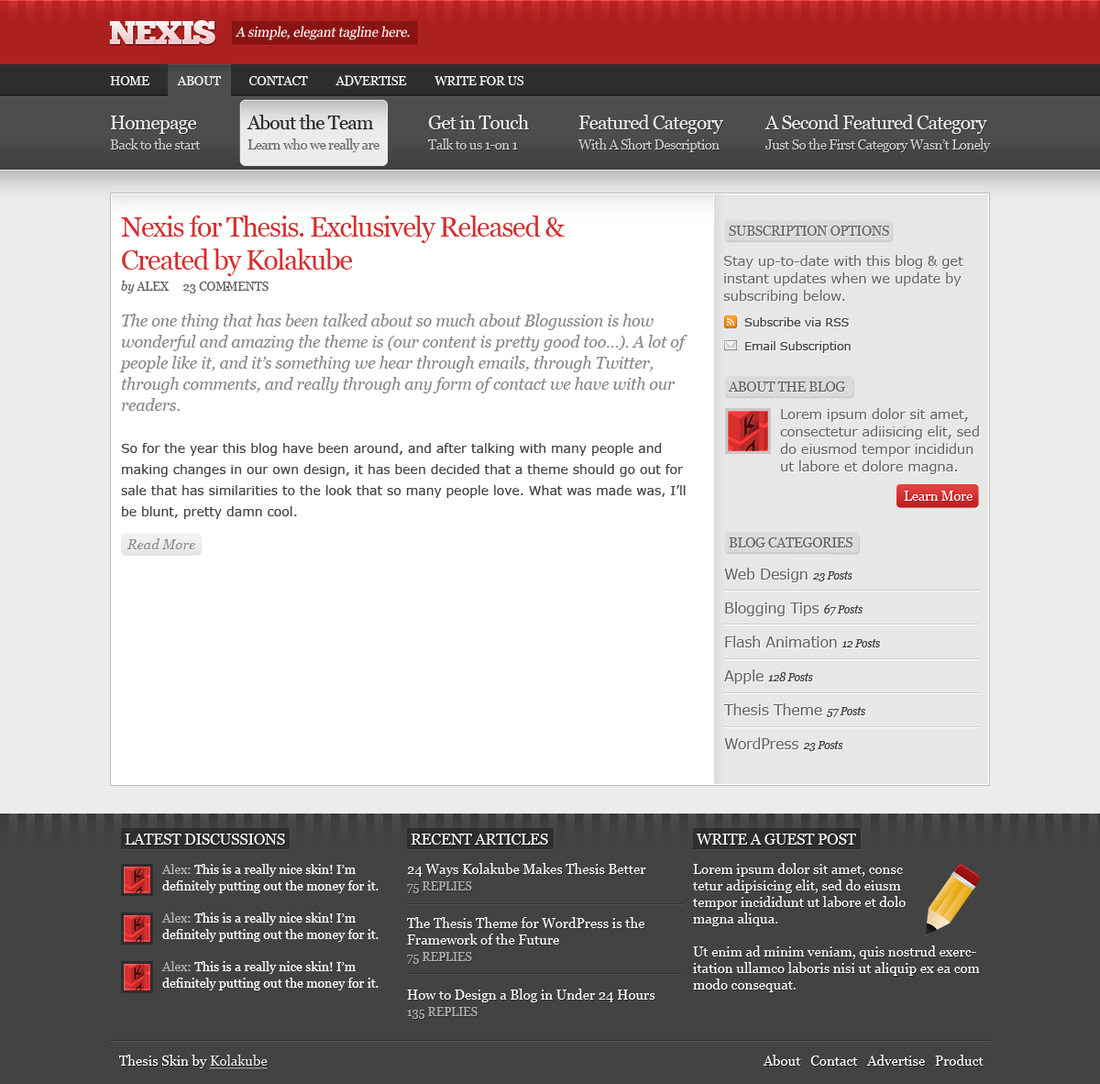
<style>
.page{position:relative;width:1100px;height:1084px;background:#ffffff}
.page>*{position:absolute;margin:0}
.t1{font:33px "ChunkFive";letter-spacing:-0.04em;color:#f5e2e2;text-transform:uppercase}
.t2{font:13.8px "Georgia";letter-spacing:-0.02em;color:#fffefe;font-style:italic}
.t3{font:12.8px "Georgia";letter-spacing:-0.02em;color:#f6f6f6}
.t4{font:13.8px/20.2px "Georgia";letter-spacing:-0.04em;color:#cdcccc}
.t5{font:19.3px/25.7px "Georgia";letter-spacing:-0.04em;color:#ececec}
.t6{font:13.8px/20.2px "Georgia";letter-spacing:-0.04em;color:#6c6b6b}
.t7{font:19.3px/25.7px "Georgia";letter-spacing:-0.04em;color:#2f2e2e}
.t8{font:27.5px/33px "Georgia";letter-spacing:-0.04em;color:#d32f2f}
.t9{font:11.9px/21.1px "Georgia-Italic";color:#626262}
.t10{font:11.9px/21.1px "Georgia";color:#626262}
.t11{font:13.8px "Georgia";letter-spacing:-0.02em;color:#646363}
.t12{font:13.8px/17.4px "Verdana";letter-spacing:-0.02em;color:#646363}
.t13{font:16px/21.1px "Georgia-Italic";color:#898888}
.t14{font:12.8px/21.1px "Verdana";color:#444444}
.t15{font:11.9px "Verdana";letter-spacing:-0.02em;color:#434343}
.t16{font:13.8px "Georgia";letter-spacing:-0.02em;color:#ffffff}
.t17{font:13.8px "Georgia-Italic";color:#8d8c8c}
.t18{font:14.7px/33.9px "Verdana";letter-spacing:-0.02em;color:#646363}
.t19{font:11px/33.9px "Georgia-Italic";letter-spacing:-0.02em;color:#414141}
.t20{font:15.6px "Georgia";letter-spacing:-0.02em;color:#ffffff;text-transform:uppercase}
.t21{font:12.8px/16.5px "Georgia";color:#ffffff}
.t22{font:12.8px/16.5px "Georgia";color:#b2b1b1}
.t23{font:13.8px/16.5px "Georgia";color:#ffffff}
.t24{font:11.9px/16.5px "Georgia";color:#b1b0b0}
.t25{font:13.8px "Georgia";color:#ffffff}
.t26{font:13.8px "Georgia";color:#e7e7e7;text-decoration:underline}
</style>
<div class="page">
<p class="t1" style="left:109px;top:20px;width:106px;height:24px">NEXIS</p>
<p class="t2" style="left:235px;top:26px;width:175px;height:14px">A simple, elegant tagline here.</p>
<p class="t3" style="left:110px;top:75px;width:414px;height:11px">HOME          ABOUT          CONTACT          ADVERTISE          WRITE FOR US</p>
<p class="t4" style="left:110px;top:116px;width:91px;height:33px"><span class="t5">Homepage<br></span>Back to the start</p>
<p class="t6" style="left:247px;top:115px;width:133px;height:37px"><span class="t7">About the Team<br></span>Learn who we really are</p>
<p class="t4" style="left:428px;top:115px;width:101px;height:34px"><span class="t5">Get in Touch<br></span>Talk to us 1-on 1</p>
<p class="t4" style="left:578px;top:115px;width:145px;height:37px"><span class="t5">Featured Category<br></span>With A Short Description</p>
<p class="t4" style="left:765px;top:115px;width:226px;height:37px"><span class="t5">A Second Featured Category<br></span>Just So the First Category Wasn’t Lonely</p>
<p class="t8" style="left:121px;top:215px;width:444px;height:78px">Nexis for Thesis. Exclusively Released &amp;<br>Created by Kolakube<br><span class="t9">by</span><span class="t10"> ALEX     23 COMMENTS</span></p>
<p class="t11" style="left:729px;top:226px;width:160px;height:10px">SUBSCRIPTION OPTIONS</p>
<p class="t12" style="left:723px;top:255px;width:241px;height:48px">Stay up-to-date with this blog &amp; get<br>instant updates when we update by<br>subscribing below.</p>
<p class="t13" style="left:119px;top:314px;width:569px;height:205px">The one thing that has been talked about so much about Blogussion is how <br>wonderful and amazing the theme is (our content is pretty good too…). A lot of <br>people like it, and it’s something we hear through emails, through Twitter, <br>through comments, and really through any form of contact we have with our <br>readers.<br><span class="t14"><br>So for the year this blog have been around, and after talking with many people and <br>making changes in our own design, it has been decided that a theme should go out for <br>sale that has similarities to the look that so many people love. What was made was, I’ll <br>be blunt, pretty damn cool.</span></p>
<p class="t15" style="left:745px;top:317px;width:104px;height:9px">Subscribe via RSS</p>
<p class="t15" style="left:745px;top:341px;width:106px;height:12px">Email Subscription</p>
<p class="t11" style="left:728px;top:381px;width:118px;height:11px">ABOUT THE BLOG</p>
<p class="t12" style="left:780px;top:408px;width:199px;height:66px">Lorem ipsum dolor sit amet, <br>consectetur adiisicing elit, sed <br>do eiusmod tempor incididun <br>ut labore et dolore magna.</p>
<p class="t16" style="left:904px;top:491px;width:69px;height:10px">Learn More</p>
<p class="t17" style="left:127px;top:538px;width:69px;height:11px">Read More</p>
<p class="t11" style="left:729px;top:537px;width:125px;height:10px">BLOG CATEGORIES</p>
<p class="t18" style="left:723px;top:568px;width:157px;height:183px">Web Design <span class="t19">23 Posts<br></span>Blogging Tips <span class="t19">67 Posts<br></span>Flash Animation <span class="t19">12 Posts<br></span>Apple <span class="t19">128 Posts<br></span>Thesis Theme <span class="t19">57 Posts<br></span>WordPress <span class="t19">23 Posts</span></p>
<p class="t20" style="left:125px;top:833px;width:160px;height:11px">LATEST DISCUSSIONS</p>
<p class="t20" style="left:411px;top:833px;width:137px;height:11px">RECENT ARTICLES</p>
<p class="t20" style="left:696px;top:833px;width:160px;height:11px">Write a guest post</p>
<p class="t21" style="left:161px;top:864px;width:218px;height:29px"><span class="t22">Alex: </span>This is a really nice skin! I’m<br>definitely putting out the money for it.</p>
<p class="t23" style="left:407px;top:863px;width:239px;height:30px">24 Ways Kolakube Makes Thesis Better<br><span class="t24">75 REPLIES</span></p>
<p class="t23" style="left:692px;top:863px;width:288px;height:129px">Lorem ipsum dolor sit amet, consc<br>tetur adipisicing elit, sed do eiusm <br>tempor incididunt ut labore et dolo <br>magna aliqua.<br><br>Ut enim ad minim veniam, quis nostrud exerc-<br>itation ullamco laboris nisi ut aliquip ex ea com<br>modo consequat.</p>
<p class="t23" style="left:407px;top:917px;width:238px;height:47px">The Thesis Theme for WordPress is the<br>Framework of the Future<br><span class="t24">75 REPLIES</span></p>
<p class="t23" style="left:407px;top:988px;width:249px;height:31px">How to Design a Blog in Under 24 Hours<br><span class="t24">135 REPLIES</span></p>
<p class="t25" style="left:119px;top:1054px;width:149px;height:15px">Thesis Skin by <span class="t26">Kolakube</span></p>
<p class="t25" style="left:763px;top:1054px;width:221px;height:11px">About   Contact   Advertise   Product</p>
</div>
